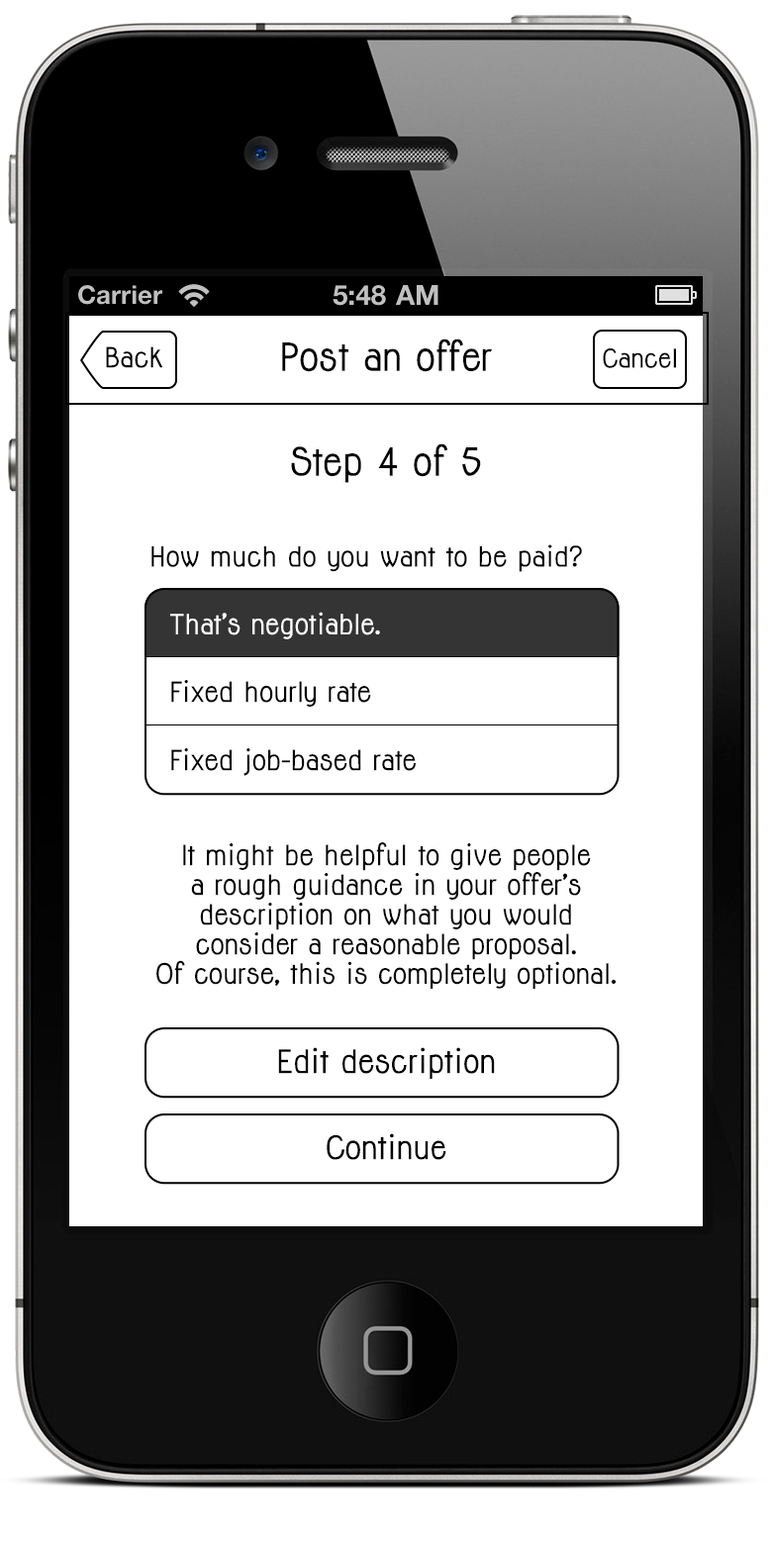
<style>
.page{position:relative;width:772px;height:1545px;background:#ffffff}
.page>*{position:absolute;margin:0}
.t1{font:35.6px "Jolly-Bold";color:#000000}
.t2{font:25.7px "Jolly-Bold";color:#000000}
.t3{font:23.8px "Jolly-Bold";color:#000000}
.t4{font:25.5px "Jolly-Bold";color:#000000}
.t5{font:25.7px "Jolly-Bold";color:#ffffff}
.t6{font:25.7px/29.6px "Jolly-Bold";color:#000000}
.t7{font:29.8px "Jolly-Bold";color:#000000}
</style>
<div class="page">
<p class="t1" style="left:282px;top:338px;width:210px;height:34px">Post an offer</p>
<p class="t2" style="left:106px;top:346px;width:57px;height:22px">Back</p>
<p class="t3" style="left:603px;top:348px;width:73px;height:20px">Cancel</p>
<p class="t1" style="left:291px;top:443px;width:190px;height:40px">Step 4 of 5</p>
<p class="t4" style="left:151px;top:544px;width:431px;height:28px">How much do you want to be paid?</p>
<p class="t5" style="left:170px;top:612px;width:210px;height:27px">That’s negotiable.</p>
<p class="t2" style="left:171px;top:680px;width:200px;height:27px">Fixed hourly rate</p>
<p class="t2" style="left:171px;top:748px;width:245px;height:28px">Fixed job-based rate</p>
<p class="t6" style="left:156px;top:842px;width:461px;height:147px;text-align:center">It might be helpful to give people        a rough guidance in your offer’s          description on what you would          consider a reasonable proposal. <br>Of course, this is completely optional.</p>
<p class="t7" style="left:278px;top:1047px;width:217px;height:32px">Edit description</p>
<p class="t7" style="left:327px;top:1133px;width:119px;height:27px">Continue</p>
</div>
